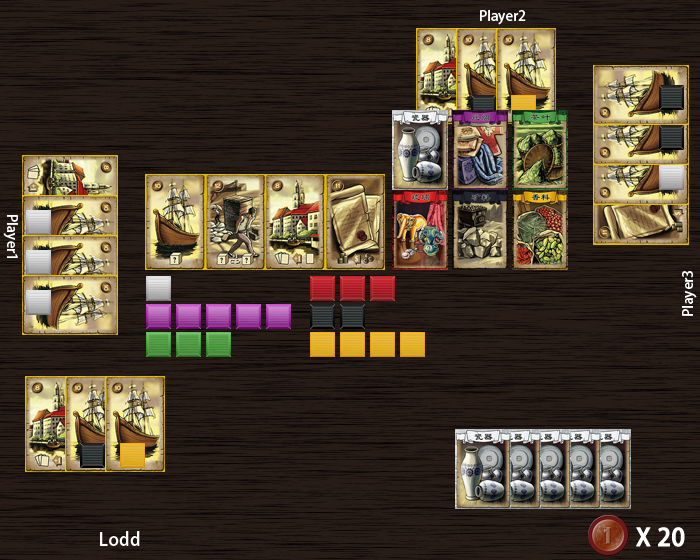
<style>
.page{position:relative;width:700px;height:560px;background:#281c17}
.page>*{position:absolute;margin:0}
.t1{font:14px "KozGoPro-Medium";color:#ffffff}
.t2{font:18px "KozGoPro-Medium";color:#ffffff}
.t3{font:24px "KozGoPr6N-Medium";color:#ffffff;font-weight:bold}
</style>
<div class="page">
<p class="t1" style="left:480px;top:10px;width:46px;height:15px">Player2</p>
<p class="t1" style="left:3px;top:215px;width:15px;height:43px;rotate:90deg">Player1</p>
<p class="t1" style="left:682px;top:271px;width:15px;height:45px;rotate:-90deg">Player3</p>
<p class="t2" style="left:100px;top:531px;width:40px;height:15px">Lodd</p>
<p class="t3" style="left:636px;top:527px;width:49px;height:20px">X 20</p>
</div>
